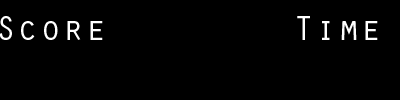
<style>
.page{position:relative;width:400px;height:100px;background:#000000}
.page>*{position:absolute;margin:0}
.t1{font:36px "OratorStd";letter-spacing:0.025em;color:#ffffff}
</style>
<div class="page">
<p class="t1" style="left:0px;top:16px;width:103px;height:24px">Score</p>
<p class="t1" style="left:297px;top:16px;width:81px;height:24px">Time</p>
</div>
